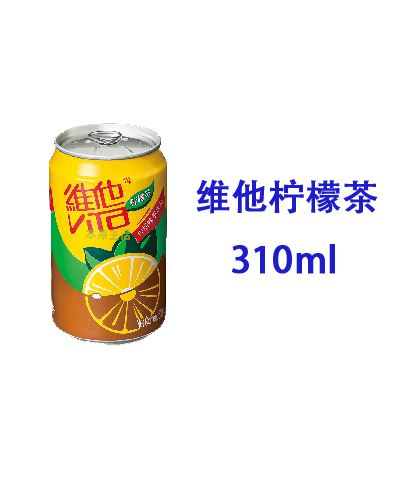
<style>
.page{position:relative;width:400px;height:500px;background:#ffffff}
.page>*{position:absolute;margin:0}
.t1{font:36px "AdobeHeitiStd-Regular";color:#1d1dcc;font-weight:bold}
</style>
<div class="page">
<p class="t1" style="left:196px;top:179px;width:182px;height:95px">维他柠檬茶          <br>    310ml</p>
</div>
